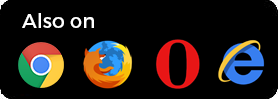
<style>
.page{position:relative;width:278px;height:99px;background:#000000}
.page>*{position:absolute;margin:0}
.t1{font:20px "Montserrat-Regular";color:#ffffff}
</style>
<div class="page">
<p class="t1" style="left:22px;top:13px;width:72px;height:15px">Also on</p>
</div>
